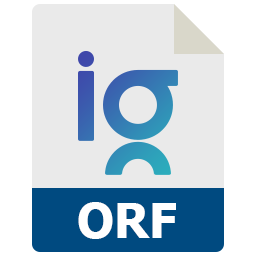
<style>
.page{position:relative;width:256px;height:256px;background:#eaeaea}
.page>*{position:absolute;margin:0}
.t1{font:48px "Tahoma-Bold";color:#ffffff}
</style>
<div class="page">
<p class="t1" style="left:78px;top:202px;width:98px;height:37px">ORF</p>
</div>
